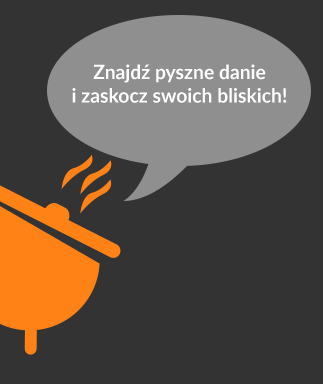
<style>
.page{position:relative;width:323px;height:384px;background:#333333}
.page>*{position:absolute;margin:0}
.t1{font:19.6px "Lato-Bold";letter-spacing:0.005em;color:#ffffff}
</style>
<div class="page">
<p class="t1" style="left:72px;top:64px;width:215px;height:39px;text-align:center">Znajdź pyszne danie<br>i zaskocz swoich bliskich!</p>
</div>
